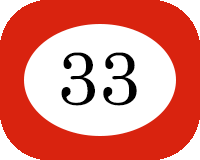
<style>
.page{position:relative;width:200px;height:160px;background:#d9230f}
.page>*{position:absolute;margin:0}
.t1{font:75px "Century";color:#000000}
</style>
<div class="page">
<p class="t1" style="left:61px;top:52px;width:76px;height:54px">33</p>
</div>
